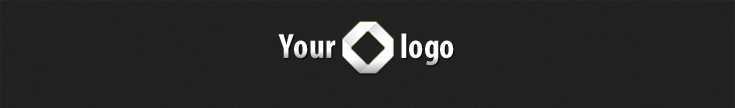
<style>
.page{position:relative;width:735px;height:108px;background:#222222}
.page>*{position:absolute;margin:0}
.t1{font:35.4px "MyriadPro-BoldCond";color:#ffffff}
</style>
<div class="page">
<p class="t1" style="left:278px;top:34px;width:58px;height:25px">Your</p>
<p class="t1" style="left:401px;top:33px;width:53px;height:33px">logo</p>
</div>
